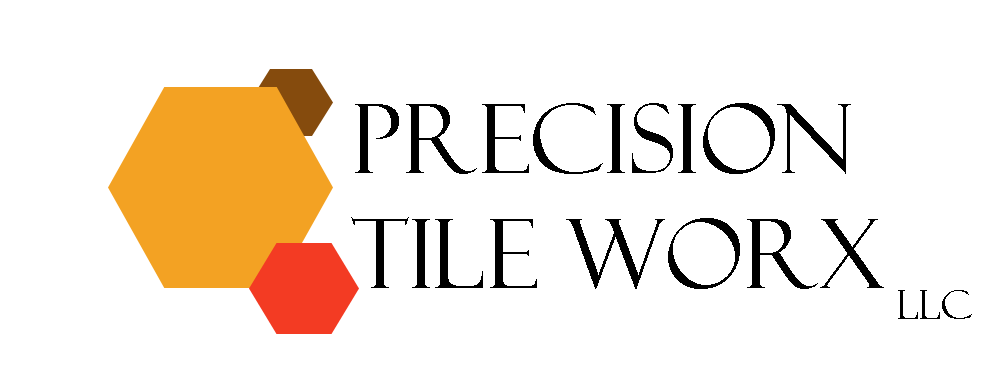
<style>
.page{position:relative;width:996px;height:383px;background:#ffffff}
.page>*{position:absolute;margin:0}
.t1{font:96px "FelixTitlingMT";color:#000000}
</style>
<div class="page">
<p class="t1" style="left:351px;top:103px;width:533px;height:186px">Precision<br>Tile Worx</p>
</div>
